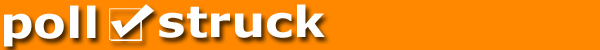
<style>
.page{position:relative;width:600px;height:50px;background:#ff8800}
.page>*{position:absolute;margin:0}
.t1{font:42.9px "Verdana-Bold";color:#ffffff;scale:1.12 1}
.t2{font:42.9px "Verdana-Bold";color:#fefefe;scale:1.12 1}
</style>
<div class="page">
<p class="t1" style="left:4px;top:5px;width:92px;height:42px">poll</p>
<p class="t2" style="left:159px;top:4px;width:166px;height:34px">struck</p>
</div>
